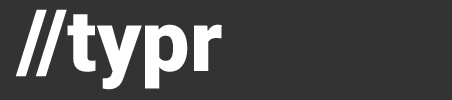
<style>
.page{position:relative;width:452px;height:100px;background:#333333}
.page>*{position:absolute;margin:0}
.t1{font:86px "Roboto-Black";color:#ffffff}
</style>
<div class="page">
<p class="t1" style="left:15px;top:9px;width:207px;height:81px">//typr</p>
</div>
